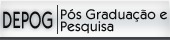
<style>
.page{position:relative;width:170px;height:40px}
.page>*{position:absolute;margin:0}
.t1{font:24.2px "KabobRegular";color:#0e0e0f;scale:0.66 1}
.t2{font:14px/12px "KabobRegular";color:#0e0e0f}
</style>
<div class="page">
<p class="t1" style="left:3px;top:11px;width:50px;height:18px">DEPOG</p>
<p class="t2" style="left:61px;top:9px;width:106px;height:25px">Pós Graduação e<br>Pesquisa</p>
</div>
